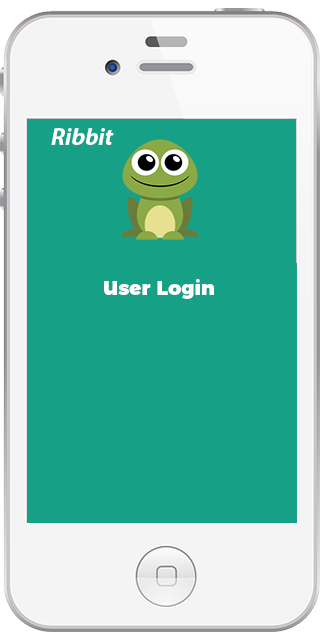
<style>
.page{position:relative;width:320px;height:640px;background:#16a085}
.page>*{position:absolute;margin:0}
.t1{font:24px "MyriadPro-BoldIt";color:#ffffff}
.t2{font:20px "MontserratAlternates-Black";color:#ffffff}
</style>
<div class="page">
<p class="t1" style="left:51px;top:128px;width:63px;height:17px">Ribbit</p>
<p class="t2" style="left:104px;top:279px;width:110px;height:20px">User Login</p>
</div>
